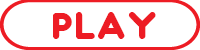
<style>
.page{position:relative;width:200px;height:50px;background:#ffffff}
.page>*{position:absolute;margin:0}
.t1{font:40px "Maagkramp";color:#ed1c24}
</style>
<div class="page">
<p class="t1" style="left:53px;top:12px;width:103px;height:27px">PLAY</p>
</div>
